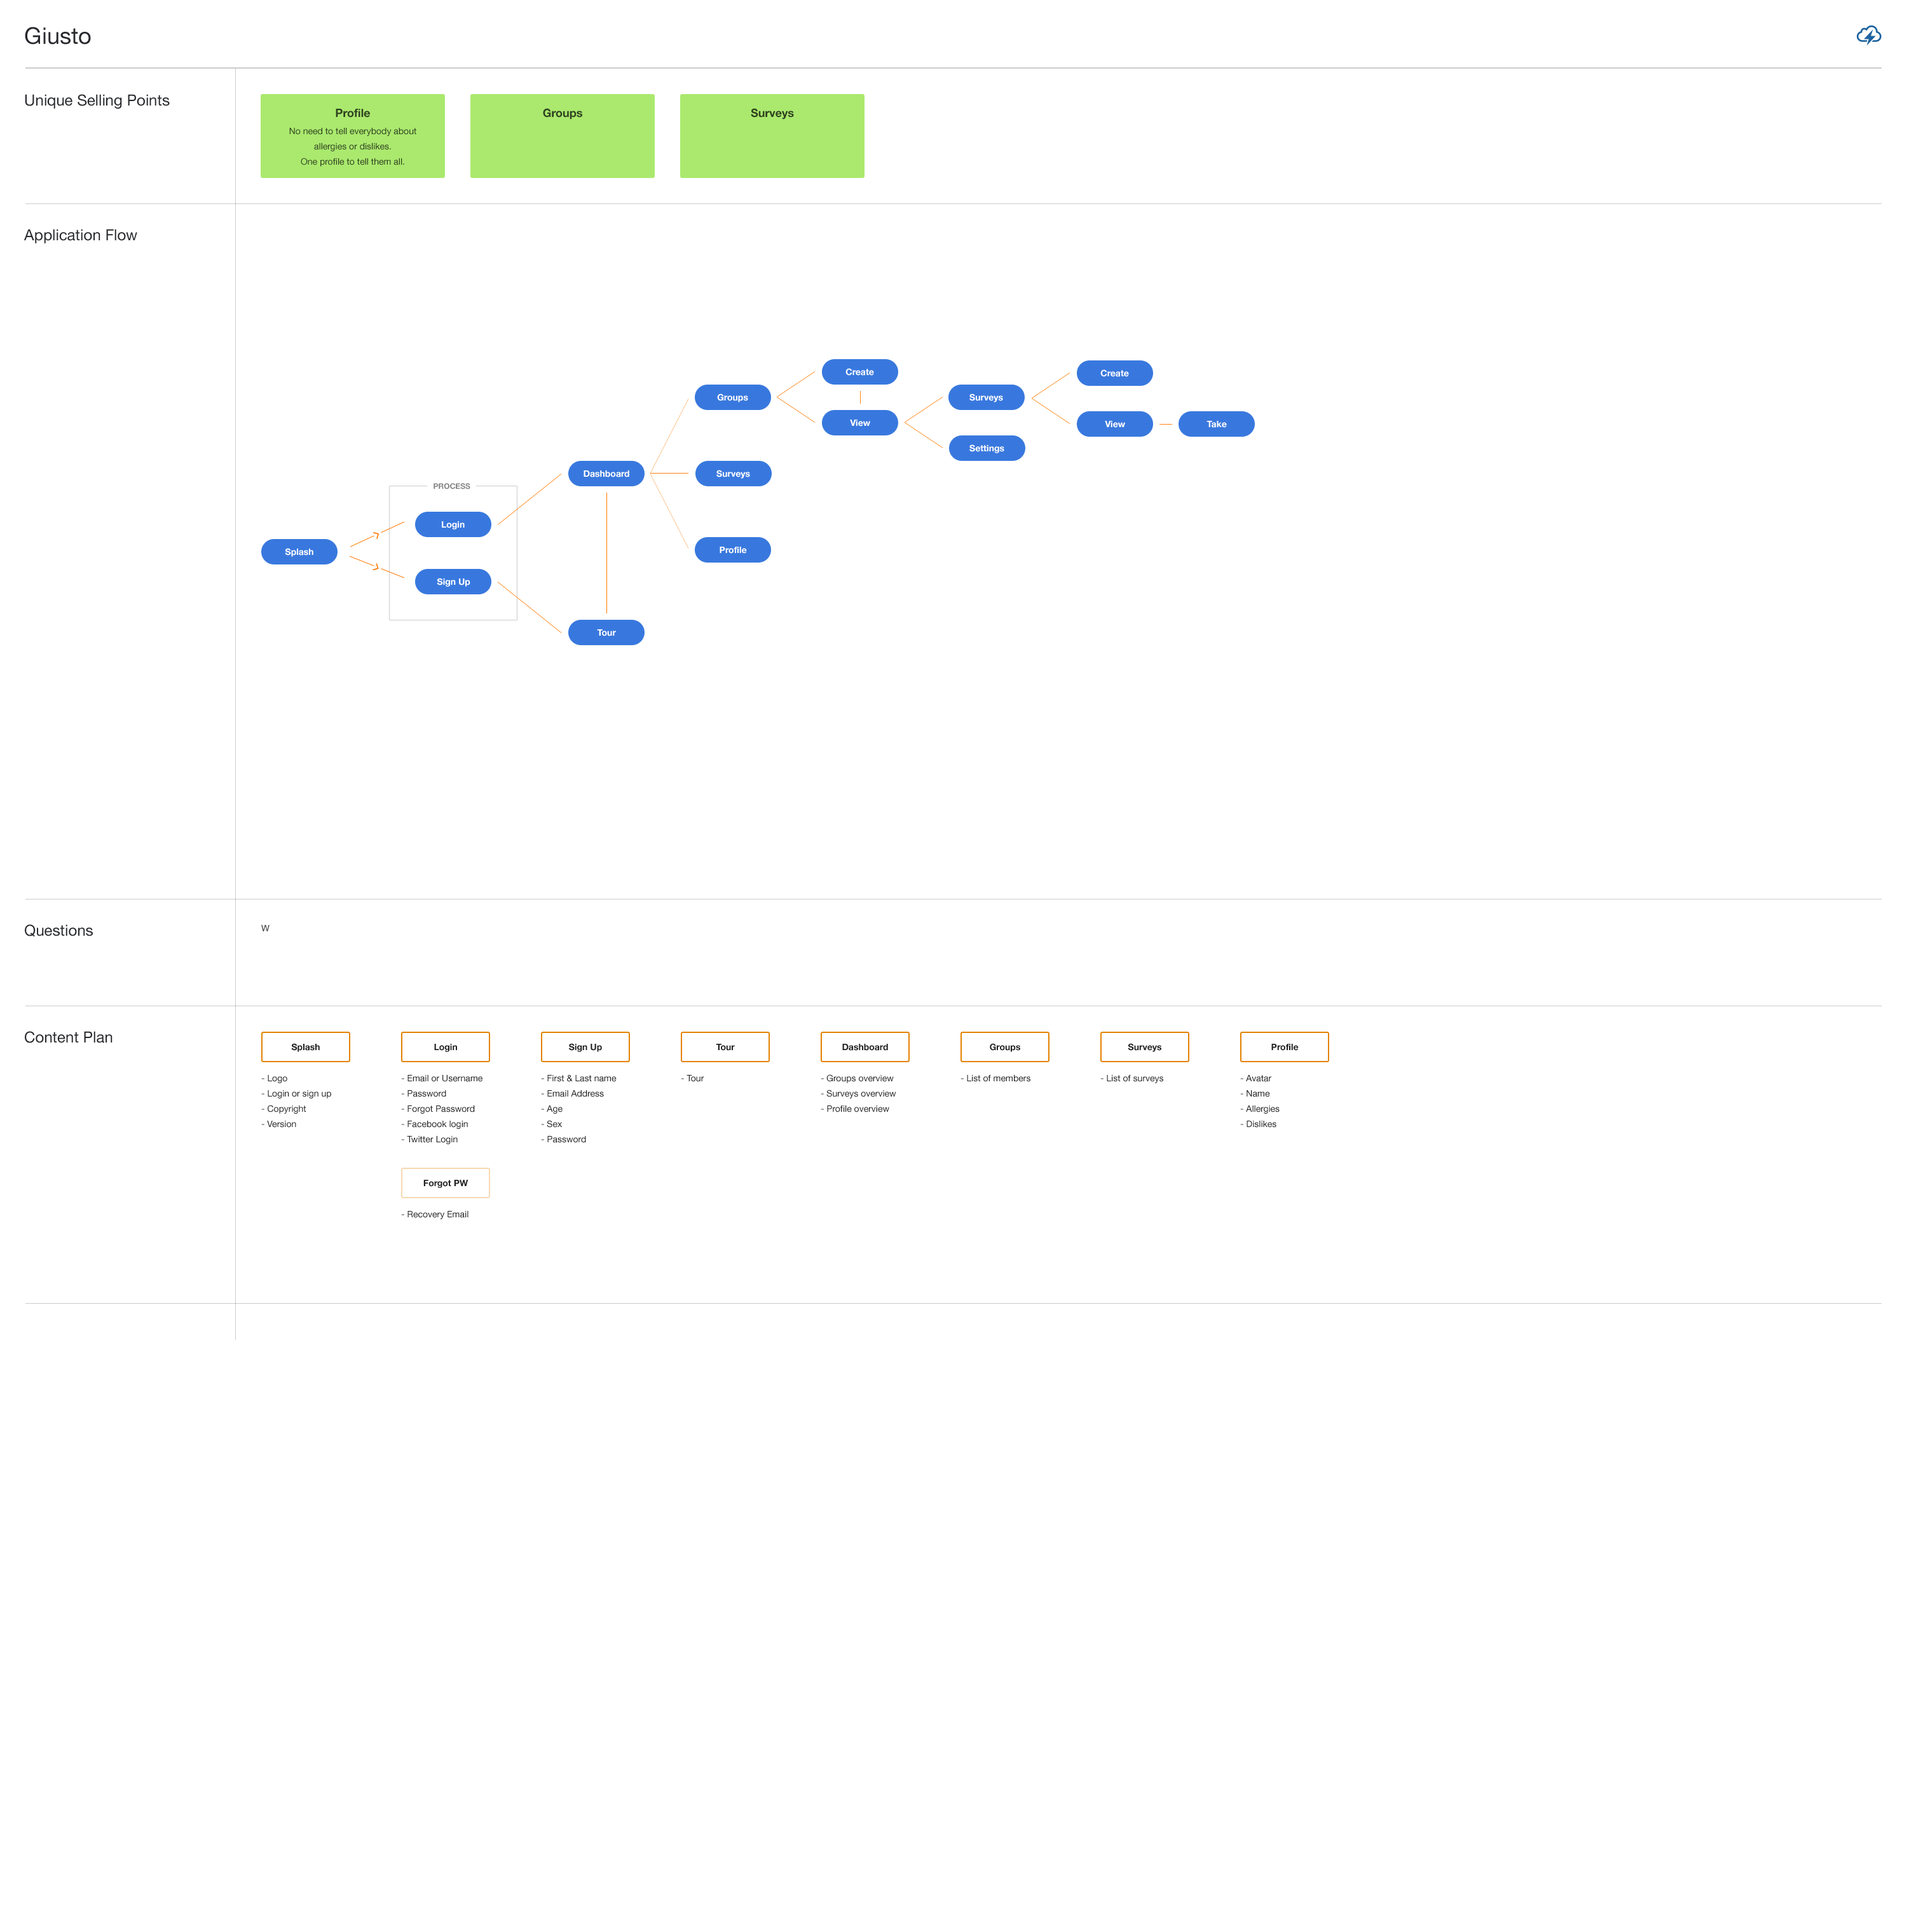
<style>
.page{position:relative;width:1907px;height:1907px;background:#ffffff}
.page>*{position:absolute;margin:0}
.t1{font:22.9px "HelveticaNeue";color:#28292d}
.t2{font:15.3px "HelveticaNeue";color:#28292d}
.t3{font:11.4px "HelveticaNeue-Bold";color:#2f411f}
.t4{font:8.9px/15.3px "HelveticaNeue";color:#2f411f}
.t5{font:8.9px "HelveticaNeue-Bold";color:#ffffff}
.t6{font:7.6px "HelveticaNeue-Bold";color:#858585}
.t7{font:8.9px "HelveticaNeue";color:#28292d}
.t8{font:8.9px "HelveticaNeue-Bold";color:#212121}
.t9{font:8.9px/15.3px "HelveticaNeue";color:#212121}
.t10{font:8.9px "HelveticaNeue";color:#212121}
</style>
<div class="page">
<p class="t1" style="left:25px;top:27px;width:66px;height:18px">Giusto</p>
<p class="t2" style="left:25px;top:94px;width:145px;height:15px">Unique Selling Points</p>
<p class="t3" style="left:336px;top:109px;width:34px;height:9px">Profile</p>
<p class="t3" style="left:543px;top:108px;width:39px;height:12px">Groups</p>
<p class="t3" style="left:751px;top:108px;width:43px;height:12px">Surveys</p>
<p class="t4" style="left:289px;top:128px;width:127px;height:39px;text-align:center">No need to tell everybody about <br>allergies or dislikes. <br>One profile to tell them all.</p>
<p class="t2" style="left:24px;top:229px;width:113px;height:15px">Application Flow</p>
<p class="t5" style="left:846px;top:368px;width:28px;height:8px">Create</p>
<p class="t5" style="left:1101px;top:369px;width:28px;height:8px">Create</p>
<p class="t5" style="left:717px;top:394px;width:31px;height:8px">Groups</p>
<p class="t5" style="left:970px;top:394px;width:33px;height:8px">Surveys</p>
<p class="t5" style="left:850px;top:420px;width:20px;height:7px">View</p>
<p class="t5" style="left:1105px;top:421px;width:20px;height:7px">View</p>
<p class="t5" style="left:1207px;top:421px;width:20px;height:7px">Take</p>
<p class="t5" style="left:970px;top:444px;width:35px;height:9px">Settings</p>
<p class="t5" style="left:584px;top:470px;width:45px;height:7px">Dashboard</p>
<p class="t5" style="left:717px;top:470px;width:33px;height:9px">Surveys</p>
<p class="t6" style="left:434px;top:483px;width:36px;height:7px">PROCESS</p>
<p class="t5" style="left:442px;top:521px;width:23px;height:9px">Login</p>
<p class="t5" style="left:285px;top:548px;width:28px;height:9px">Splash</p>
<p class="t5" style="left:720px;top:547px;width:27px;height:7px">Profile</p>
<p class="t5" style="left:437px;top:578px;width:33px;height:9px">Sign Up</p>
<p class="t5" style="left:597px;top:629px;width:19px;height:7px">Tour</p>
<p class="t2" style="left:25px;top:924px;width:68px;height:13px">Questions</p>
<p class="t7" style="left:261px;top:925px;width:9px;height:6px">W</p>
<p class="t2" style="left:25px;top:1031px;width:88px;height:12px">Content Plan</p>
<p class="t8" style="left:291px;top:1043px;width:29px;height:9px">Splash</p>
<p class="t8" style="left:434px;top:1044px;width:23px;height:8px">Login</p>
<p class="t8" style="left:569px;top:1043px;width:33px;height:9px">Sign Up</p>
<p class="t8" style="left:716px;top:1044px;width:19px;height:7px">Tour</p>
<p class="t8" style="left:842px;top:1044px;width:46px;height:7px">Dashboard</p>
<p class="t8" style="left:990px;top:1043px;width:30px;height:9px">Groups</p>
<p class="t8" style="left:1128px;top:1043px;width:34px;height:9px">Surveys</p>
<p class="t8" style="left:1272px;top:1044px;width:27px;height:7px">Profile</p>
<p class="t9" style="left:261px;top:1075px;width:70px;height:53px">- Logo<br>- Login or sign up<br>- Copyright<br>- Version</p>
<p class="t9" style="left:401px;top:1075px;width:82px;height:69px">- Email or Username<br>- Password<br>- Forgot Password<br>- Facebook login<br>- Twitter Login</p>
<p class="t9" style="left:541px;top:1075px;width:76px;height:68px">- First &amp; Last name<br>- Email Address<br>- Age<br>- Sex<br>- Password</p>
<p class="t10" style="left:681px;top:1075px;width:23px;height:7px">- Tour</p>
<p class="t9" style="left:821px;top:1074px;width:75px;height:39px">- Groups overview<br>- Surveys overview<br>- Profile overview</p>
<p class="t10" style="left:961px;top:1075px;width:70px;height:7px">- List of members</p>
<p class="t10" style="left:1101px;top:1075px;width:63px;height:8px">- List of surveys</p>
<p class="t9" style="left:1240px;top:1075px;width:40px;height:53px">- Avatar<br>- Name<br>- Allergies<br>- Dislikes</p>
<p class="t8" style="left:423px;top:1180px;width:46px;height:8px">Forgot PW</p>
<p class="t10" style="left:401px;top:1211px;width:68px;height:8px">- Recovery Email</p>
</div>
